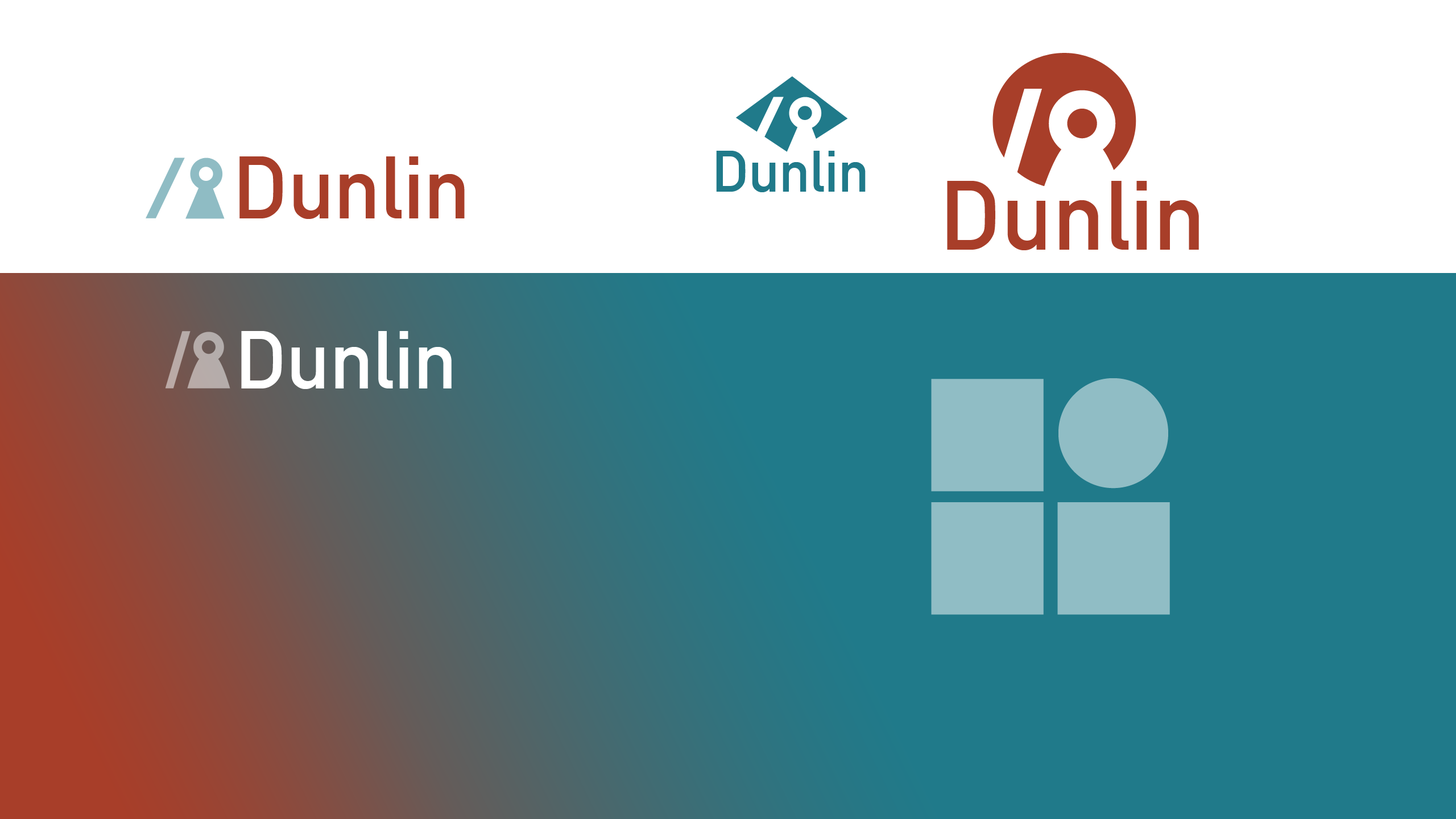
<style>
.page{position:relative;width:1456px;height:819px;background:#ffffff}
.page>*{position:absolute;margin:0}
.t1{font:86.7px "DINAlternate-Bold";color:#a83e29}
.t2{font:57.3px "DINAlternate-Bold";color:#207a8a}
.t3{font:96.8px "DINAlternate-Bold";color:#a83e29}
.t4{font:81.1px "DINAlternate-Bold";color:#ffffff}
</style>
<div class="page">
<p class="t1" style="left:239px;top:156px;width:226px;height:63px">Dunlin</p>
<p class="t2" style="left:716px;top:151px;width:150px;height:41px">Dunlin</p>
<p class="t3" style="left:947px;top:181px;width:252px;height:69px">Dunlin</p>
<p class="t4" style="left:241px;top:331px;width:211px;height:58px">Dunlin</p>
</div>
